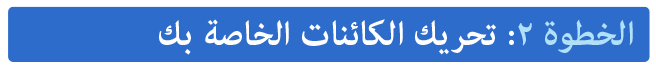
<style>
.page{position:relative;width:656px;height:72px;background:#2d6ccb}
.page>*{position:absolute;margin:0}
.t1{font:48px "AdobeArabic-Bold";color:#ffffff}
.t2{font:48px "AdobeArabic-Bold";color:#b0e1f9}
</style>
<div class="page">
<p class="t1" style="left:159px;top:19px;width:474px;height:36px"><span class="t2">الخطوة ٢</span>: تحريك الكائنات الخاصة بك</p>
</div>
